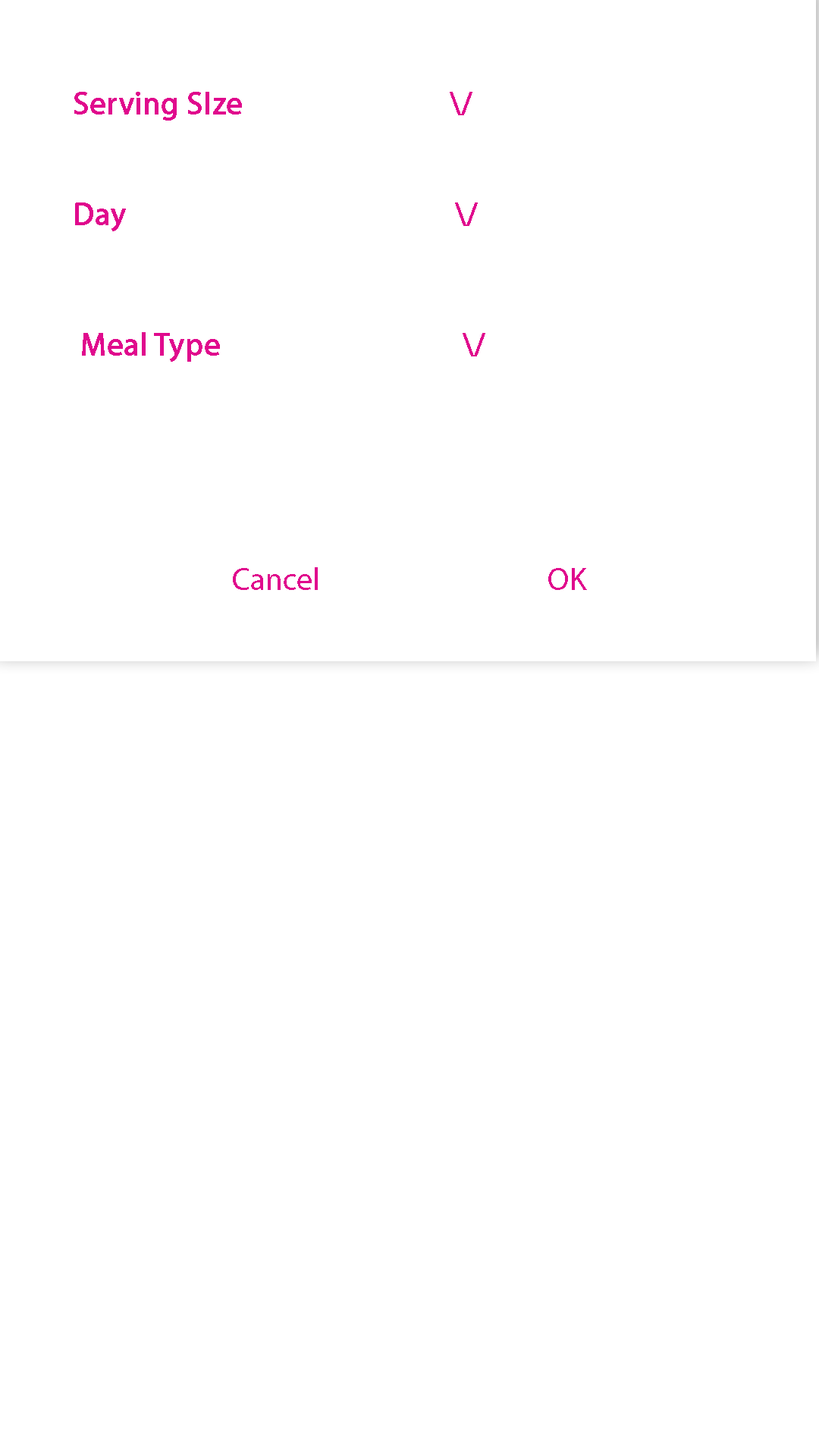
<style>
.page{position:relative;width:819px;height:1456px;background:#ffffff}
.page>*{position:absolute;margin:0}
.t1{font:31.6px "MyriadPro-Regular";color:#e00a8d;font-weight:bold}
.t2{font:31.6px "MyriadPro-Regular";color:#e00a8d}
</style>
<div class="page">
<p class="t1" style="left:74px;top:92px;width:168px;height:29px">Serving SIze</p>
<p class="t1" style="left:450px;top:92px;width:22px;height:23px">\/</p>
<p class="t1" style="left:75px;top:202px;width:403px;height:29px">Day                \/</p>
<p class="t1" style="left:82px;top:332px;width:403px;height:30px">Meal Type         \/</p>
<p class="t2" style="left:233px;top:567px;width:354px;height:23px">Cancel                                  OK</p>
</div>
